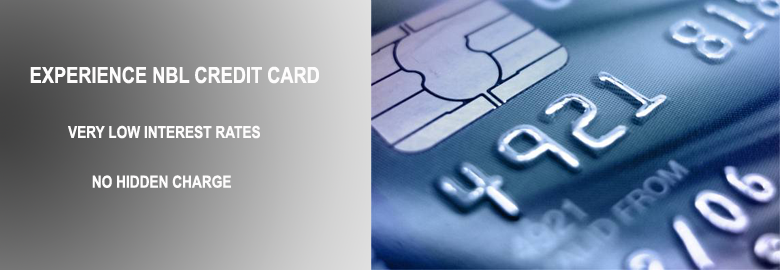
<style>
.page{position:relative;width:780px;height:270px}
.page>*{position:absolute;margin:0}
.t1{font:22.2px "ArialNarrow-Bold";color:#fdfcfc;text-transform:uppercase}
.t2{font:16.7px "ArialNarrow-Bold";color:#fdfcfc;text-transform:uppercase}
</style>
<div class="page">
<p class="t1" style="left:30px;top:66px;width:289px;height:18px">Experience nbl credit card</p>
<p class="t2" style="left:68px;top:125px;width:192px;height:14px">Very Low interest rates</p>
<p class="t2" style="left:92px;top:175px;width:139px;height:13px">No Hidden charge</p>
</div>
